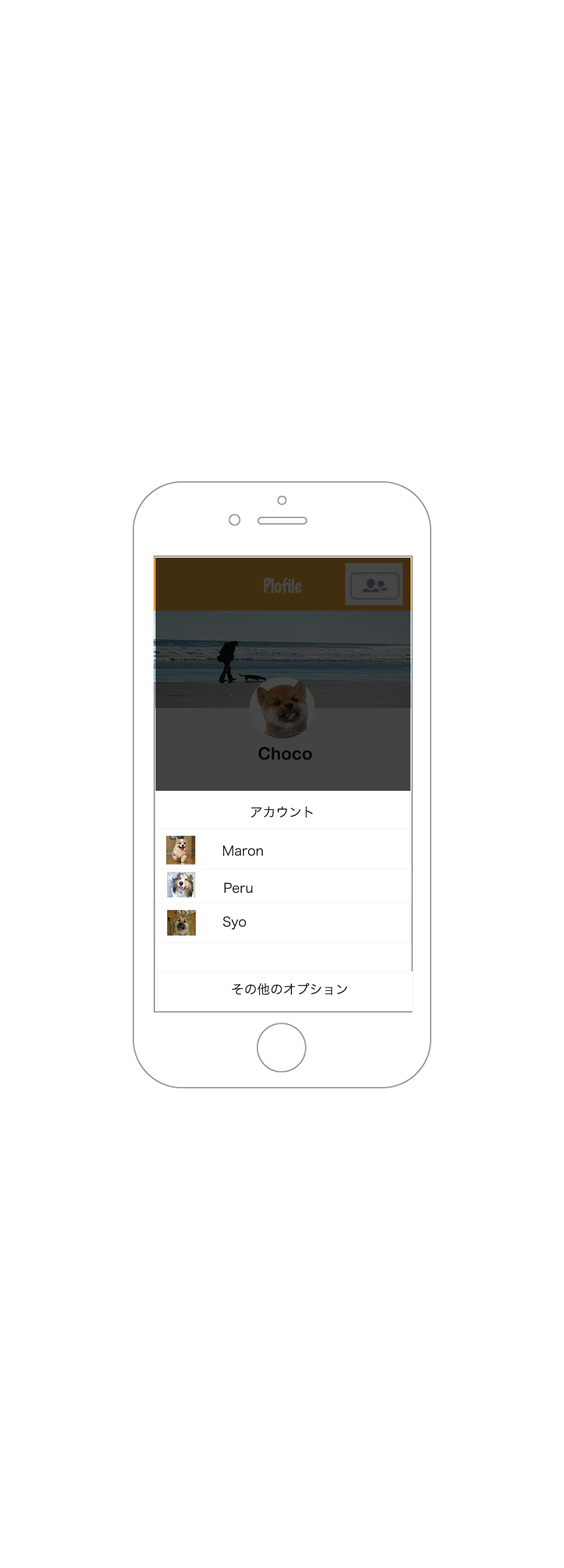
<style>
.page{position:relative;width:564px;height:1568px;background:#ffffff}
.page>*{position:absolute;margin:0}
.t1{font:17.4px "MarkerFelt-Thin";color:#474747}
.t2{font:17.4px "ArialRoundedMTBold";color:#1d1a1a}
.t3{font:13.1px "HiraKakuProN-W3";color:#1d1a1a}
</style>
<div class="page">
<p class="t1" style="left:263px;top:578px;width:39px;height:15px">Plofile</p>
<p class="t2" style="left:259px;top:747px;width:54px;height:13px">Choco</p>
<p class="t3" style="left:251px;top:806px;width:62px;height:11px">アカウント</p>
<p class="t3" style="left:223px;top:845px;width:40px;height:11px">Maron</p>
<p class="t3" style="left:224px;top:883px;width:29px;height:10px">Peru</p>
<p class="t3" style="left:223px;top:916px;width:23px;height:14px">Syo</p>
<p class="t3" style="left:232px;top:983px;width:116px;height:12px">その他のオプション</p>
</div>
